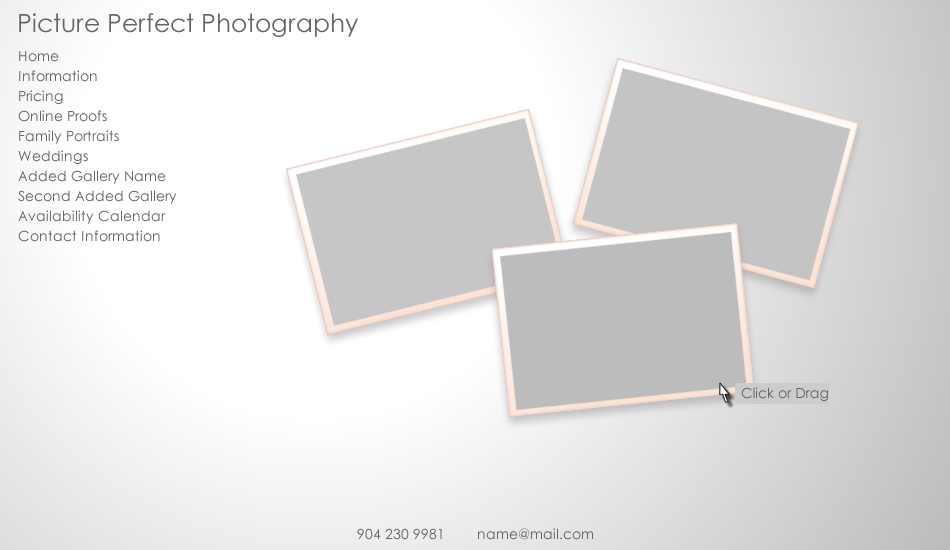
<style>
.page{position:relative;width:950px;height:550px;background:#ffffff}
.page>*{position:absolute;margin:0}
.t1{font:25px "CenturyGothic";color:#666666}
.t2{font:14px "CenturyGothic";color:#666666}
</style>
<div class="page">
<p class="t1" style="left:19px;top:13px;width:339px;height:24px">Picture Perfect Photography</p>
<p class="t2" style="left:19px;top:51px;width:40px;height:11px">Home</p>
<p class="t2" style="left:19px;top:70px;width:78px;height:12px">Information</p>
<p class="t2" style="left:19px;top:90px;width:44px;height:14px">Pricing</p>
<p class="t2" style="left:18px;top:110px;width:89px;height:12px">Online Proofs</p>
<p class="t2" style="left:19px;top:130px;width:100px;height:14px">Family Portraits</p>
<p class="t2" style="left:18px;top:150px;width:70px;height:14px">Weddings</p>
<p class="t2" style="left:18px;top:170px;width:148px;height:14px">Added Gallery Name</p>
<p class="t2" style="left:18px;top:190px;width:159px;height:14px">Second Added Gallery</p>
<p class="t2" style="left:18px;top:210px;width:148px;height:14px">Availability Calendar</p>
<p class="t2" style="left:18px;top:230px;width:142px;height:12px">Contact Information</p>
<p class="t2" style="left:741px;top:387px;width:87px;height:14px">Click or Drag</p>
</div>
